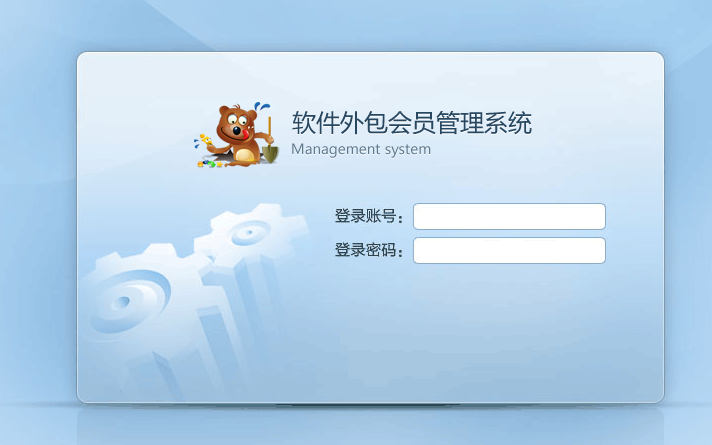
<style>
.page{position:relative;width:712px;height:445px}
.page>*{position:absolute;margin:0}
.t1{font:24px "MicrosoftYaHei"}
.t2{font:24px "MicrosoftYaHei";color:#284761}
.t3{font:14px "MicrosoftYaHei"}
.t4{font:14px "MicrosoftYaHei";color:#5f798d}
</style>
<div class="page">
<p class="t1" style="left:292px;top:112px;width:240px;height:24px">软件外包会员管理系统</p>
<p class="t2" style="left:292px;top:111px;width:240px;height:24px">软件外包会员管理系统</p>
<p class="t3" style="left:292px;top:144px;width:139px;height:15px">Management system</p>
<p class="t4" style="left:292px;top:143px;width:139px;height:15px">Management system</p>
</div>
